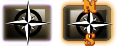
<style>
.page{position:relative;width:119px;height:46px}
.page>*{position:absolute;margin:0}
.t1{font:18px "old+sailor";color:#f09e1f}
.t2{font:18px "old+sailor"}
</style>
<div class="page">
<p class="t1" style="left:81px;top:0px;width:17px;height:14px">N</p>
<p class="t2" style="left:83px;top:33px;width:13px;height:13px">S</p>
</div>
